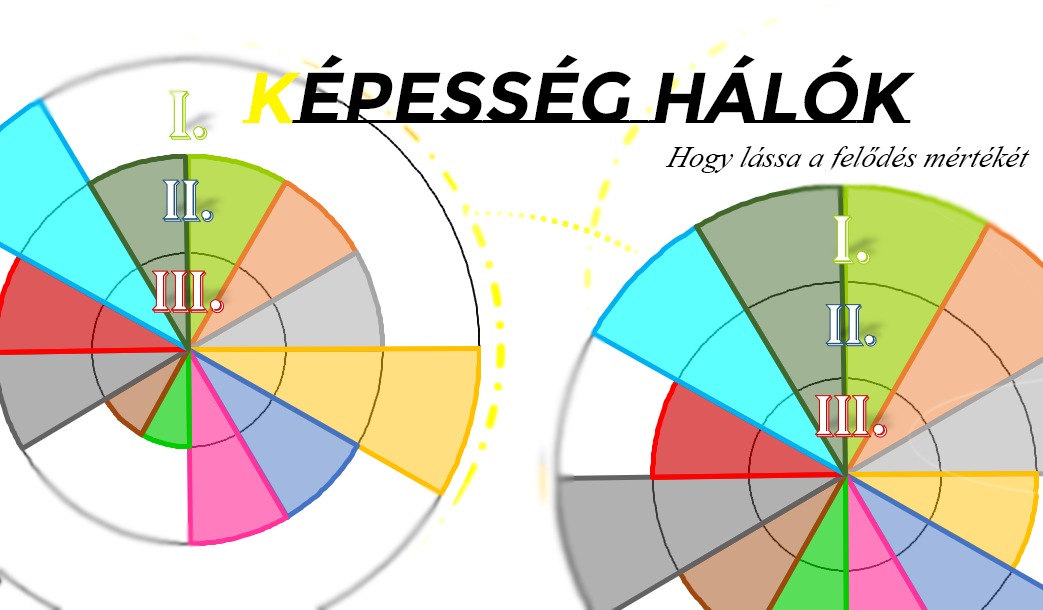
<style>
.page{position:relative;width:1043px;height:610px;background:#ffffff}
.page>*{position:absolute;margin:0}
.t1{font:72px "MontserratSubrayada-Bold";color:#000000;font-style:italic}
.t2{font:72px "MontserratSubrayada-Bold";color:#fff600;font-style:italic}
.t3{font:30px "TimesNewRomanPS-ItalicMT";color:#000000;font-style:italic}
</style>
<div class="page">
<p class="t1" style="left:242px;top:54px;width:674px;height:69px"><span class="t2">K</span>épesség hálók</p>
<p class="t3" style="left:665px;top:146px;width:365px;height:27px">Hogy lássa a felődés mértékét</p>
</div>
